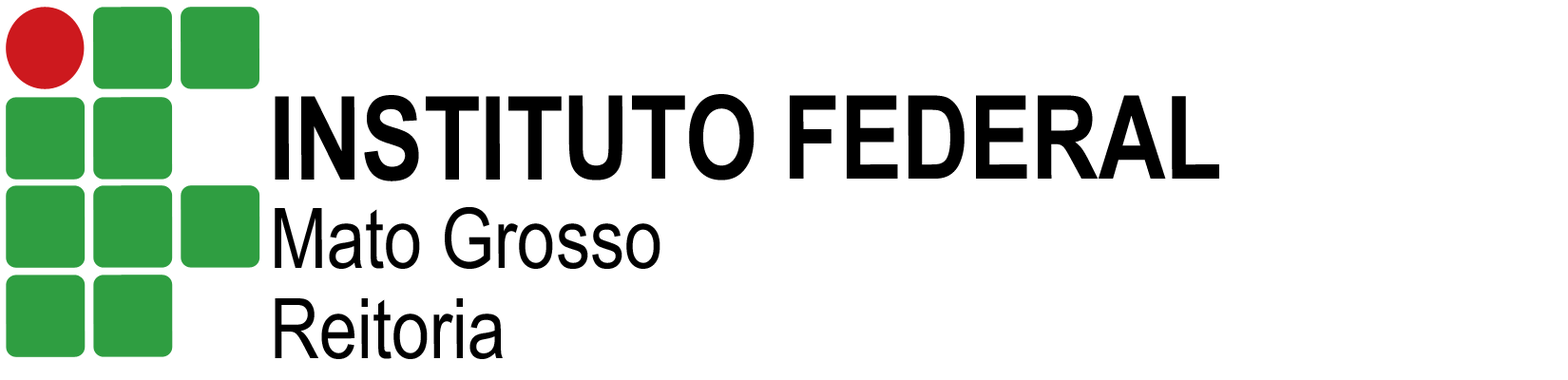
<style>
.page{position:relative;width:1568px;height:380px;background:#ffffff}
.page>*{position:absolute;margin:0}
.t1{font:115.9px "ArialNarrow-Bold";color:#000000}
.t2{font:83.6px "ArialNarrow";color:#000000}
</style>
<div class="page">
<p class="t1" style="left:275px;top:94px;width:944px;height:88px">INSTITUTO FEDERAL</p>
<p class="t2" style="left:275px;top:207px;width:385px;height:62px">Mato Grosso</p>
<p class="t2" style="left:275px;top:298px;width:228px;height:61px">Reitoria</p>
</div>
